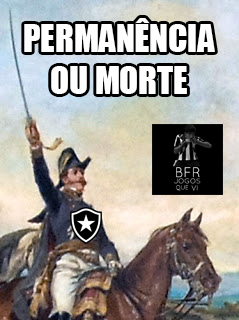
<style>
.page{position:relative;width:239px;height:320px}
.page>*{position:absolute;margin:0}
.t1{font:35px "Impact";color:#fefefe}
</style>
<div class="page">
<p class="t1" style="left:24px;top:18px;width:191px;height:76px;text-align:center">PERMANÊNCIA<br>OU MORTE</p>
</div>
